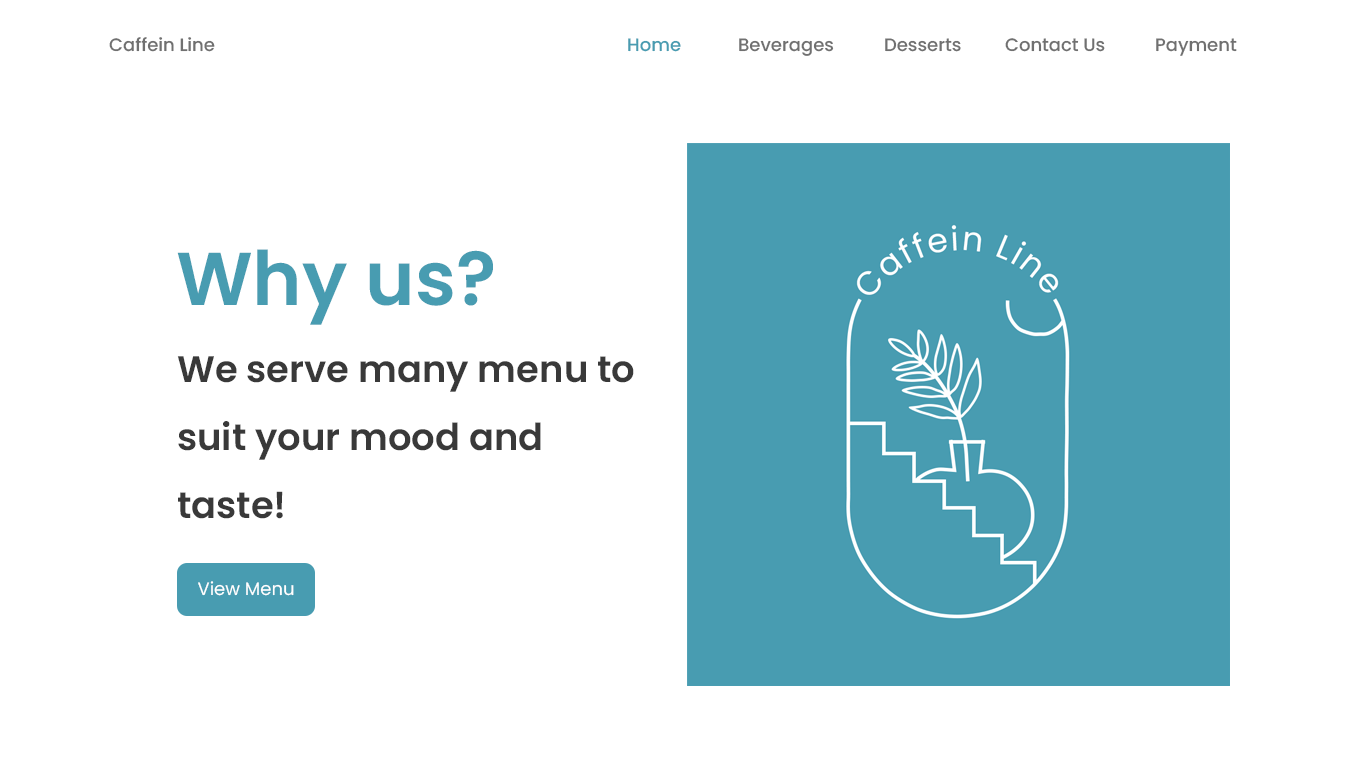
<style>
.page{position:relative;width:1366px;height:768px;background:#ffffff}
.page>*{position:absolute;margin:0}
.t1{font:18px "Poppins-Medium";color:#707070}
.t2{font:18px "Poppins-Medium";color:#489cb1}
.t3{font:75px "Poppins-SemiBold";color:#489cb1}
.t4{font:37px/68px "Poppins-SemiBold";color:#393939}
.t5{font:18px "Poppins-Regular";color:#ffffff}
.t6{font:90px "Poppins-SemiBold";color:#ffffff}
</style>
<div class="page">
<p class="t1" style="left:109px;top:37px;width:106px;height:15px">Caffein Line</p>
<p class="t2" style="left:628px;top:38px;width:53px;height:14px">Home</p>
<p class="t1" style="left:739px;top:38px;width:95px;height:18px">Beverages</p>
<p class="t1" style="left:885px;top:38px;width:76px;height:14px">Desserts</p>
<p class="t1" style="left:1005px;top:38px;width:100px;height:14px">Contact Us</p>
<p class="t1" style="left:1156px;top:38px;width:81px;height:18px">Payment</p>
<p class="t3" style="left:177px;top:249px;width:316px;height:76px">Why us?</p>
<p class="t4" style="left:177px;top:356px;width:457px;height:163px">We serve many menu to suit your mood and taste!</p>
<p class="t5" style="left:198px;top:581px;width:96px;height:15px;text-align:center">View Menu<br><span class="t6">V</span></p>
</div>
